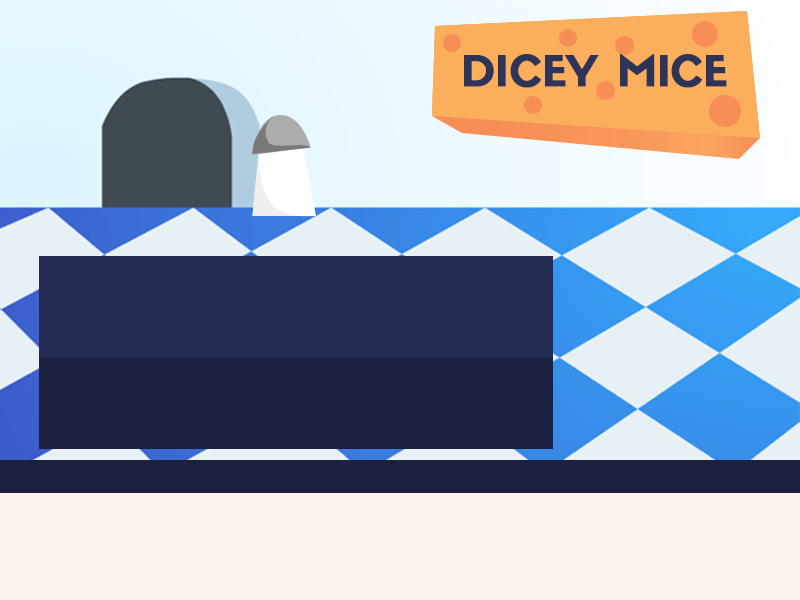
<style>
.page{position:relative;width:800px;height:600px}
.page>*{position:absolute;margin:0}
.t1{font:41.5px "Sifonn-Pro";color:#2d3457;font-weight:bold}
</style>
<div class="page">
<p class="t1" style="left:464px;top:54px;width:263px;height:34px">DICEY MICE</p>
</div>
